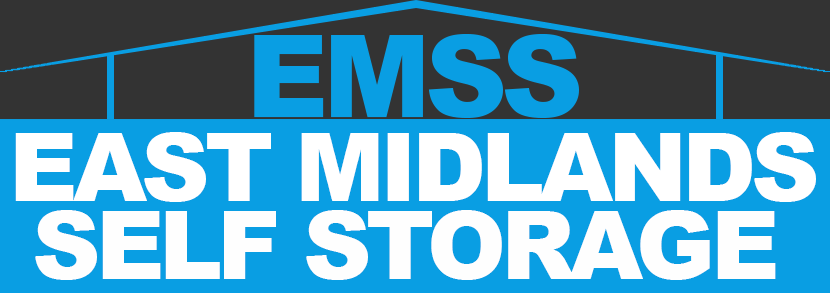
<style>
.page{position:relative;width:830px;height:293px;background:#099ee3}
.page>*{position:absolute;margin:0}
.t1{font:114px "Arial-Black";letter-spacing:-0.05em;color:#099ee3}
.t2{font:94.6px "Arial-Black";letter-spacing:-0.05em;color:#ffffff}
.t3{font:94.6px "Arial-Black";letter-spacing:-0.05em;color:#fefefe}
</style>
<div class="page">
<p class="t1" style="left:254px;top:34px;width:325px;height:84px">EMSS</p>
<p class="t2" style="left:15px;top:132px;width:801px;height:70px">EAST MIDLANDS</p>
<p class="t3" style="left:35px;top:210px;width:741px;height:70px">SELF STORAGE</p>
</div>
